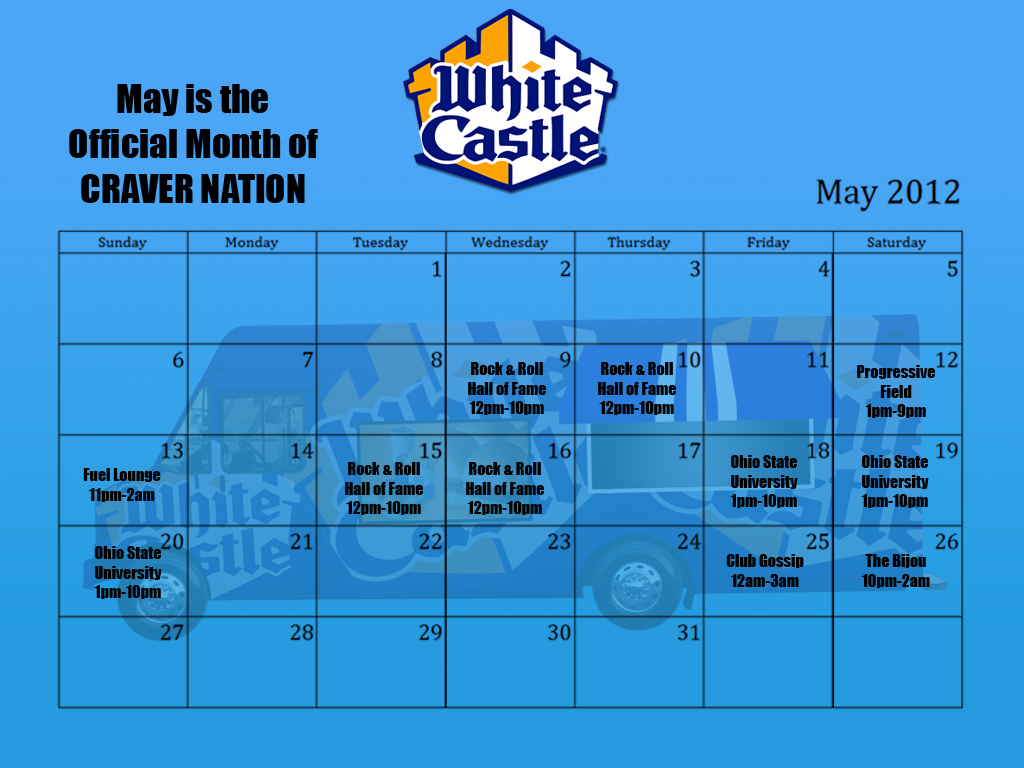
<style>
.page{position:relative;width:1024px;height:768px}
.page>*{position:absolute;margin:0}
.t1{font:37.3px "Impact";color:#000000}
.t2{font:16px "Impact";color:#000000}
</style>
<div class="page">
<p class="t1" style="left:69px;top:84px;width:249px;height:119px;text-align:center">May is the<br>Official Month of<br>CRAVER NATION</p>
<p class="t2" style="left:468px;top:362px;width:78px;height:53px;text-align:center">Rock &amp; Roll<br>Hall of Fame<br>12pm-10pm</p>
<p class="t2" style="left:598px;top:362px;width:78px;height:53px;text-align:center">Rock &amp; Roll<br>Hall of Fame<br>12pm-10pm</p>
<p class="t2" style="left:857px;top:365px;width:78px;height:53px;text-align:center">Progressive<br>Field<br>1pm-9pm</p>
<p class="t2" style="left:345px;top:462px;width:78px;height:53px;text-align:center">Rock &amp; Roll<br>Hall of Fame<br>12pm-10pm</p>
<p class="t2" style="left:466px;top:462px;width:78px;height:53px;text-align:center">Rock &amp; Roll<br>Hall of Fame<br>12pm-10pm</p>
<p class="t2" style="left:730px;top:455px;width:68px;height:53px;text-align:center">Ohio State<br>University<br>1pm-10pm</p>
<p class="t2" style="left:861px;top:455px;width:68px;height:53px;text-align:center">Ohio State<br>University<br>1pm-10pm</p>
<p class="t2" style="left:83px;top:468px;width:78px;height:34px;text-align:center">Fuel Lounge<br>11pm-2am</p>
<p class="t2" style="left:94px;top:546px;width:68px;height:53px;text-align:center">Ohio State<br>University<br>1pm-10pm</p>
<p class="t2" style="left:726px;top:554px;width:78px;height:33px;text-align:center">Club Gossip<br>12am-3am</p>
<p class="t2" style="left:861px;top:554px;width:69px;height:34px;text-align:center">The Bijou<br>10pm-2am</p>
</div>
